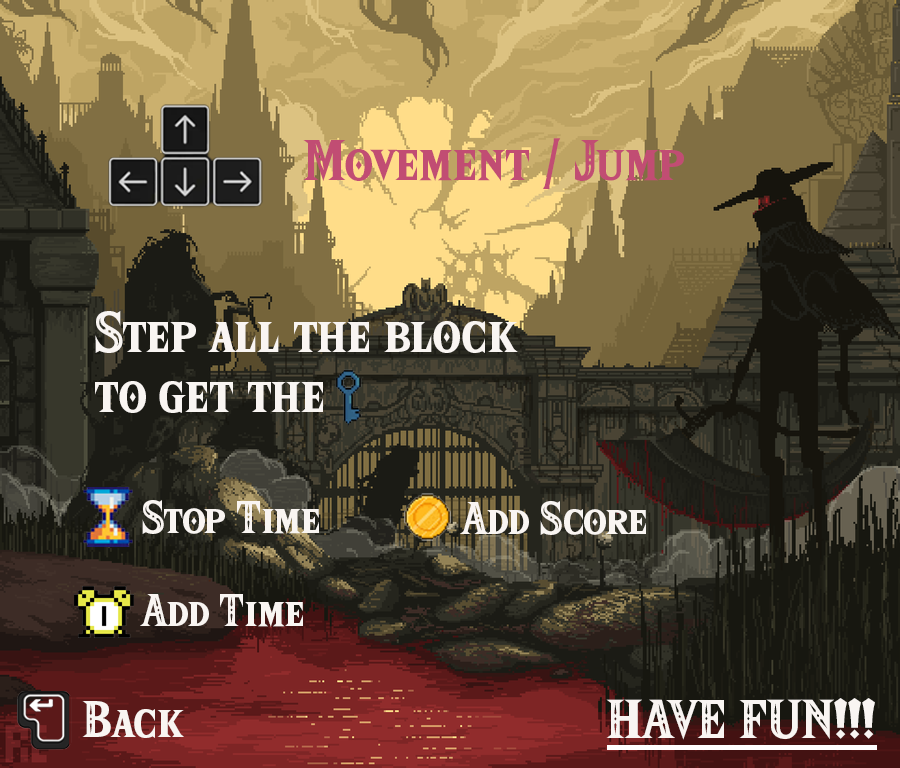
<style>
.page{position:relative;width:900px;height:768px}
.page>*{position:absolute;margin:0}
.t1{font:50px "HyliaSerifBeta-Regular";color:#c14d73}
.t2{font:50px "HyliaSerifBeta-Regular";color:#f9f5f2}
.t3{font:40px "HyliaSerifBeta-Regular";color:#f9f5f2}
.t4{font:45px "HyliaSerifBeta-Regular";color:#f9f5f2}
.t5{font:48px "HyliaSerifBeta-Regular";color:#f9f5f2}
</style>
<div class="page">
<p class="t1" style="left:303px;top:138px;width:381px;height:51px">Movement / Jump</p>
<p class="t2" style="left:95px;top:311px;width:423px;height:102px">Step all the block <br>to get the</p>
<p class="t3" style="left:142px;top:500px;width:177px;height:34px">Stop Time</p>
<p class="t3" style="left:460px;top:501px;width:186px;height:34px">Add Score</p>
<p class="t3" style="left:140px;top:594px;width:163px;height:33px">Add Time</p>
<p class="t4" style="left:82px;top:701px;width:102px;height:37px">Back</p>
<p class="t5" style="left:606px;top:698px;width:269px;height:42px">HAVE FUN!!!</p>
</div>
